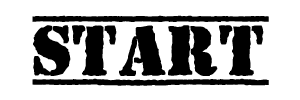
<style>
.page{position:relative;width:300px;height:100px;background:#ffffff}
.page>*{position:absolute;margin:0}
.t1{font:70.9px "TopSecret";letter-spacing:-0.02em;color:#000000;text-transform:uppercase;font-weight:bold}
</style>
<div class="page">
<p class="t1" style="left:32px;top:15px;width:237px;height:71px">start</p>
</div>
